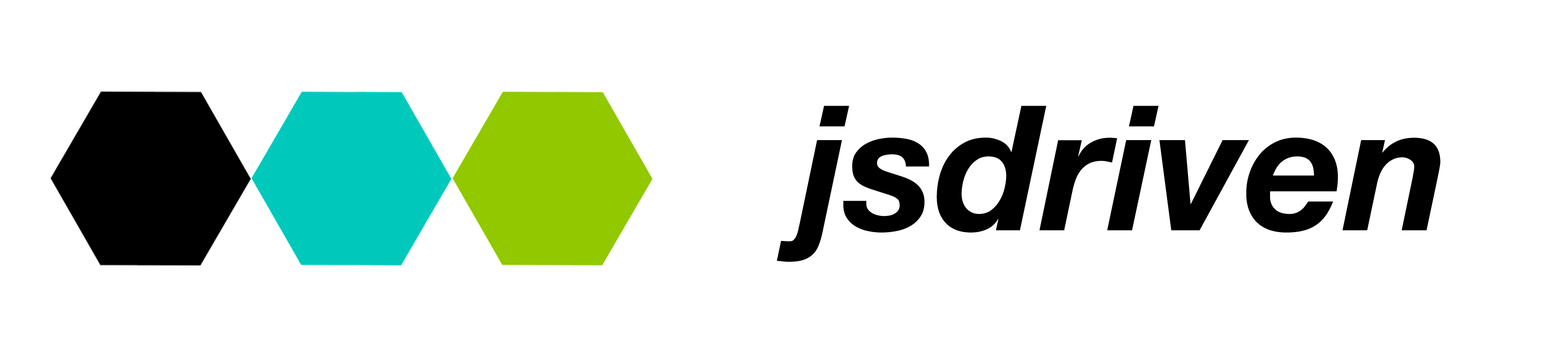
<style>
.page{position:relative;width:1568px;height:356px;background:#ffffff}
.page>*{position:absolute;margin:0}
.t1{font:174px "HelveticaNeue-BoldItalic";color:#000000}
</style>
<div class="page">
<p class="t1" style="left:777px;top:106px;width:663px;height:156px">jsdriven</p>
</div>
